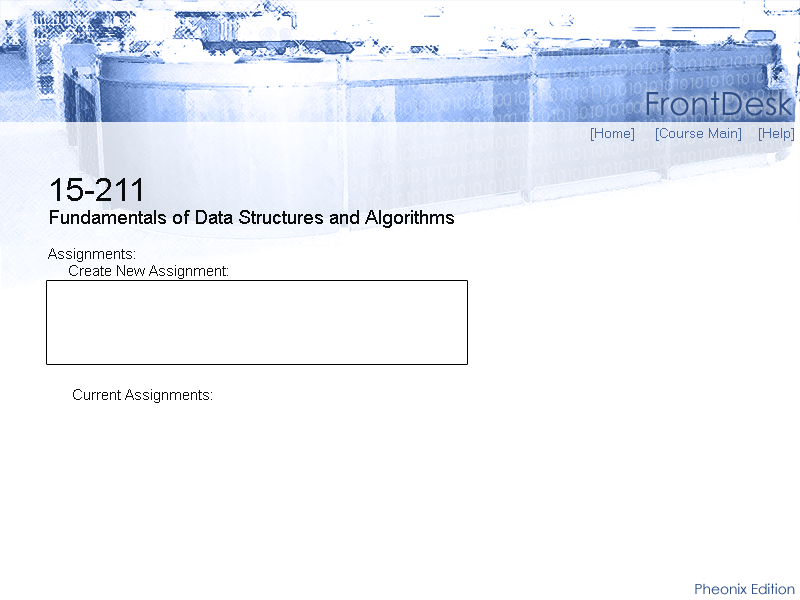
<style>
.page{position:relative;width:800px;height:600px;background:#ffffff}
.page>*{position:absolute;margin:0}
.t1{font:32px "CenturyGothic";color:#2d4e89}
.t2{font:13.3px "MicrosoftSansSerif";color:#4768a3}
.t3{font:14.7px "ArialMT";color:#000000}
.t4{font:32px "ArialMT";color:#000000}
.t5{font:18.7px "ArialMT";color:#000000}
.t6{font:13.9px "CenturyGothic";color:#2d4e89}
</style>
<div class="page">
<p class="t1" style="left:646px;top:91px;width:147px;height:25px">FrontDesk</p>
<p class="t2" style="left:591px;top:128px;width:203px;height:13px">[Home]     [Course Main]    [Help]</p>
<p class="t3" style="left:48px;top:178px;width:406px;height:225px;opacity:0.95"><span class="t4">15-211<br></span><span class="t5">Fundamentals of Data Structures and Algorithms<br></span><br>Assignments:<br>     Create New Assignment:<br><br><br><br><br><br><br>      Current Assignments:</p>
<p class="t6" style="left:695px;top:583px;width:100px;height:12px">Pheonix Edition</p>
</div>
